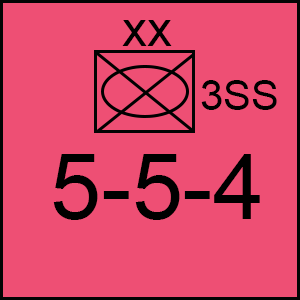
<style>
.page{position:relative;width:300px;height:300px;background:#ee4f74}
.page>*{position:absolute;margin:0}
.t1{font:50px "ArialMT";color:#000000}
.t2{font:41.7px "ArialMT";color:#000000}
.t3{font:91.7px "ArialMT";color:#000000}
</style>
<div class="page">
<p class="t1" style="left:122px;top:20px;width:50px;height:26px">xx</p>
<p class="t2" style="left:201px;top:80px;width:76px;height:30px">3SS</p>
<p class="t3" style="left:53px;top:154px;width:207px;height:66px">5-5-4</p>
</div>
